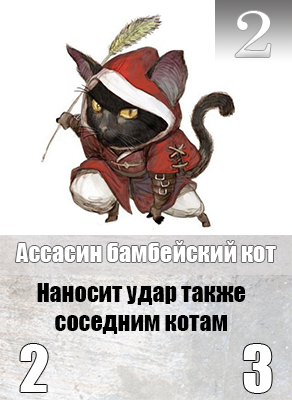
<style>
.page{position:relative;width:292px;height:400px;background:#ffffff}
.page>*{position:absolute;margin:0}
.t1{font:65.6px "Century";color:#ffffff;scale:1.18 1}
.t2{font:24px "Impact";color:#ffffff}
.t3{font:24px "Impact";color:#000000}
</style>
<div class="page">
<p class="t1" style="left:235px;top:11px;width:36px;height:46px">2</p>
<p class="t2" style="left:16px;top:241px;width:260px;height:21px">Ассасин бамбейский кот</p>
<p class="t3" style="left:37px;top:283px;width:209px;height:51px;text-align:center">Наносит удар также соседним котам</p>
</div>
